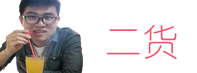
<style>
.page{position:relative;width:197px;height:73px;background:#ffffff}
.page>*{position:absolute;margin:0}
.t1{font:37px "YouYuan";color:#f84f71}
</style>
<div class="page">
<p class="t1" style="left:106px;top:25px;width:71px;height:35px">二货</p>
</div>
